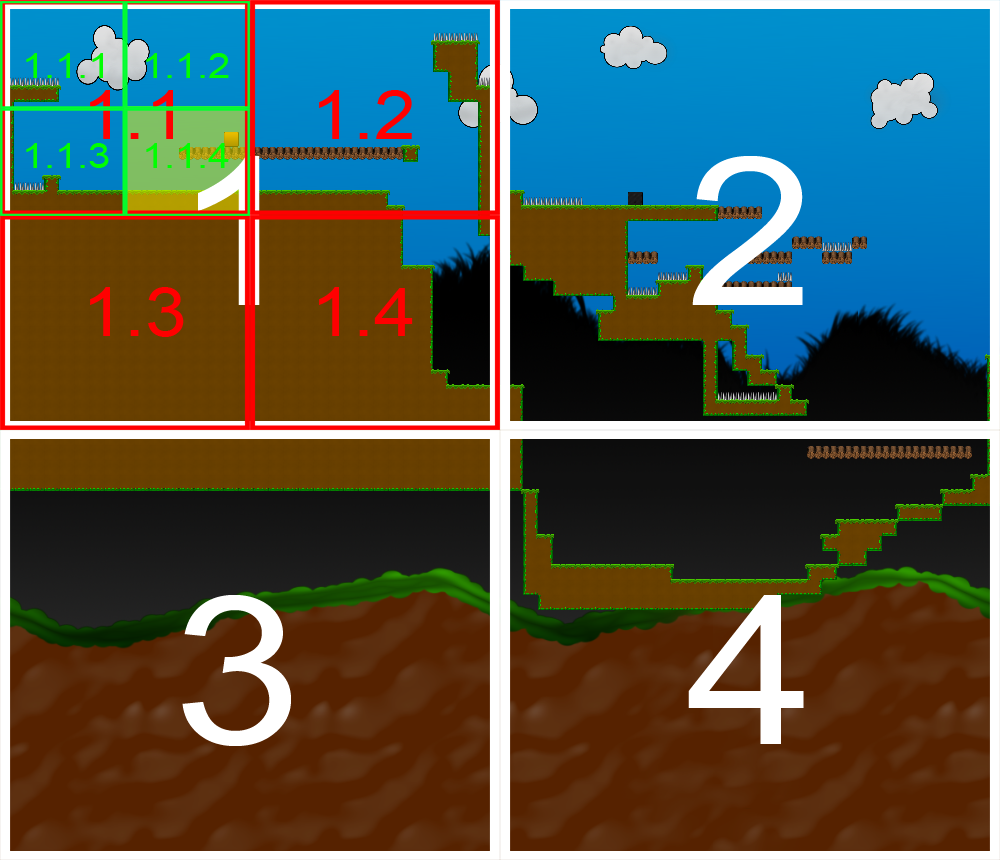
<style>
.page{position:relative;width:1000px;height:860px}
.page>*{position:absolute;margin:0}
.t1{font:35.3px "ArialMT";color:#00ff00;scale:1.13 1}
.t2{font:67.5px "ArialMT";color:#ff0000;scale:1.11 1}
.t3{font:207.9px "ArialMT";scale:1.11 1}
.t4{font:207.9px "ArialMT";color:#ffffff;scale:1.11 1}
</style>
<div class="page">
<p class="t1" style="left:26px;top:53px;width:77px;height:25px">1.1.1</p>
<p class="t1" style="left:146px;top:53px;width:83px;height:25px">1.1.2</p>
<p class="t2" style="left:90px;top:90px;width:83px;height:49px">1.1</p>
<p class="t2" style="left:319px;top:90px;width:93px;height:49px">1.2</p>
<p class="t1" style="left:26px;top:143px;width:83px;height:25px">1.1.3</p>
<p class="t1" style="left:146px;top:143px;width:83px;height:25px">1.1.4</p>
<p class="t3" style="left:198px;top:156px;width:62px;height:149px">1</p>
<p class="t4" style="left:692px;top:156px;width:111px;height:149px">2</p>
<p class="t2" style="left:90px;top:287px;width:94px;height:50px">1.3</p>
<p class="t2" style="left:319px;top:287px;width:94px;height:49px">1.4</p>
<p class="t4" style="left:182px;top:595px;width:109px;height:151px">3</p>
<p class="t4" style="left:688px;top:595px;width:116px;height:149px">4</p>
</div>
